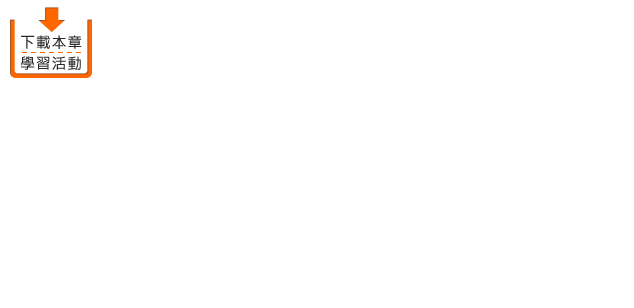
<style>
.page{position:relative;width:634px;height:308px;background:#ffffff}
.page>*{position:absolute;margin:0}
.t1{font:15px/21px "MicrosoftJhengHeiRegular";letter-spacing:0.05em;color:#2a2a2a}
</style>
<div class="page">
<p class="t1" style="left:21px;top:35px;width:61px;height:35px">下載本章<br>學習活動</p>
</div>
